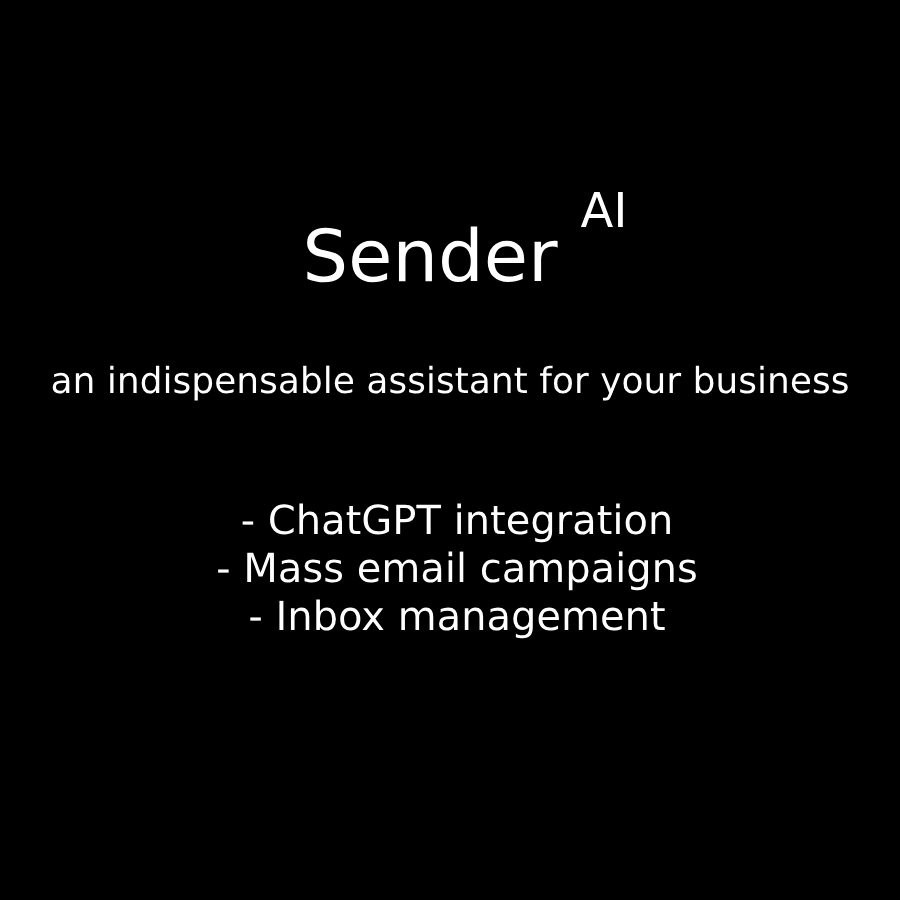
<style>
.page{position:relative;width:900px;height:900px;background:#000000}
.page>*{position:absolute;margin:0}
.t1{font:48px "DejaVuSans";color:#ffffff}
.t2{font:72px "DejaVuSans";color:#ffffff}
.t3{font:36px "DejaVuSans";color:#ffffff}
.t4{font:40px "DejaVuSans";color:#ffffff}
</style>
<div class="page">
<p class="t1" style="left:580px;top:192px;width:43px;height:35px">AI</p>
<p class="t2" style="left:307px;top:226px;width:251px;height:57px">Sender</p>
<p class="t3" style="left:52px;top:365px;width:796px;height:36px">an indispensable assistant for your business</p>
<p class="t4" style="left:218px;top:503px;width:478px;height:136px;text-align:center">- ChatGPT integration<br>- Mass email campaigns<br>- Inbox management</p>
</div>
